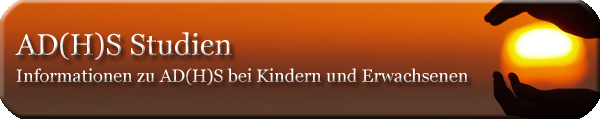
<style>
.page{position:relative;width:600px;height:120px}
.page>*{position:absolute;margin:0}
.t1{font:30px "Georgia"}
.t2{font:18px "Georgia";color:#ffffff}
</style>
<div class="page">
<p class="t1" style="left:15px;top:32px;width:217px;height:28px">AD(H)S Studien</p>
<p class="t2" style="left:16px;top:68px;width:452px;height:17px">Informationen zu AD(H)S bei Kindern und Erwachsenen</p>
</div>
